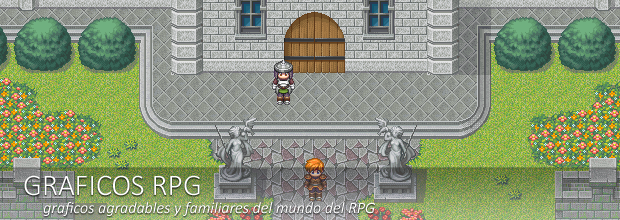
<style>
.page{position:relative;width:620px;height:220px}
.page>*{position:absolute;margin:0}
.t1{font:30px "Calibri-Light";color:#ffffff}
.t2{font:16px "Calibri-Italic";color:#ffffff}
</style>
<div class="page">
<p class="t1" style="left:24px;top:175px;width:176px;height:21px">GRAFICOS RPG</p>
<p class="t2" style="left:43px;top:202px;width:332px;height:14px">graficos agradables y familiares del mundo del RPG</p>
</div>
